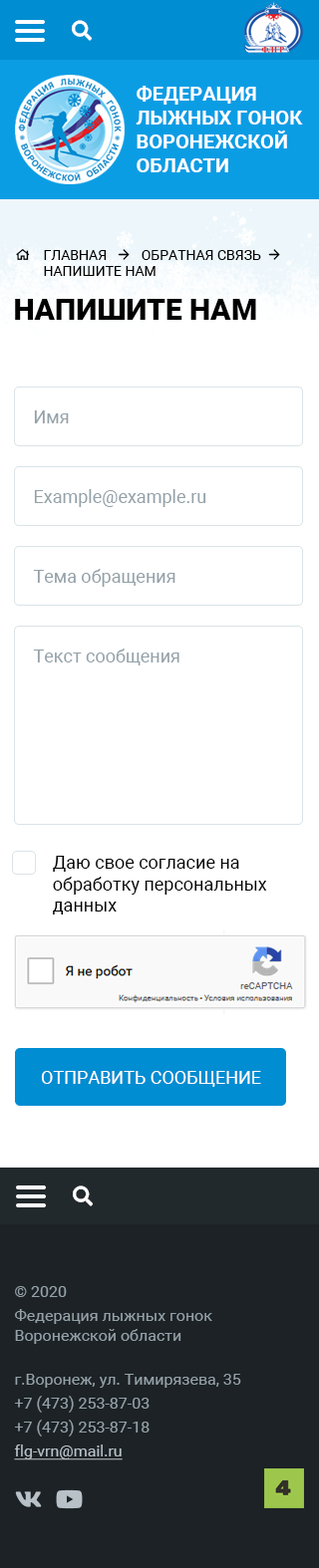
<style>
.page{position:relative;width:319px;height:1568px;background:#ffffff}
.page>*{position:absolute;margin:0}
.t1{font:19.9px "Roboto-Bold";color:#ffffff;text-transform:uppercase}
.t2{font:13.9px "Roboto-Regular";color:#000000;text-transform:uppercase}
.t3{font:29.9px "Roboto-Black";color:#000000;text-transform:uppercase}
.t4{font:17.9px "Roboto-Regular";color:#94a1a9}
.t5{font:17.9px "Roboto-Regular";color:#000000}
.t6{font:17.9px "Roboto-Regular";color:#ffffff;text-transform:uppercase}
.t7{font:15.9px/23.9px "Roboto-Regular";color:#94a1a9}
.t8{font:15.9px/19.9px "Roboto-Regular";color:#94a1a9}
.t9{font:15.9px/23.9px "Roboto-Regular";color:#b7c1c7;text-decoration:underline}
</style>
<div class="page">
<p class="t1" style="left:135px;top:86px;width:168px;height:86px">ФЕДЕРАЦИЯ <br>ЛЫЖНЫХ ГОНОК<br>воронежской <br>области</p>
<p class="t2" style="left:44px;top:250px;width:217px;height:26px">Главная          обратная связь          <br>Напишите нам</p>
<p class="t3" style="left:15px;top:299px;width:241px;height:21px">напишите нам</p>
<p class="t4" style="left:34px;top:410px;width:35px;height:13px">Имя</p>
<p class="t4" style="left:34px;top:489px;width:172px;height:18px">Example@example.ru</p>
<p class="t4" style="left:33px;top:569px;width:142px;height:18px">Тема обращения</p>
<p class="t4" style="left:33px;top:649px;width:146px;height:16px">Текст сообщения</p>
<p class="t5" style="left:53px;top:856px;width:214px;height:59px">Даю свое согласие на <br>обработку персональных <br>данных</p>
<p class="t6" style="left:41px;top:1071px;width:220px;height:16px">Отправить сообщение</p>
<p class="t7" style="left:15px;top:1286px;width:197px;height:58px">© 2020 <br>Федерация лыжных гонок <br><span class="t8">Воронежской области</span></p>
<p class="t7" style="left:14px;top:1374px;width:227px;height:86px">г.Воронеж, ул. Тимирязева, 35<br>+7 (473) 253-87-03<br>+7 (473) 253-87-18<br><span class="t9">flg-vrn@mail.ru</span></p>
</div>
